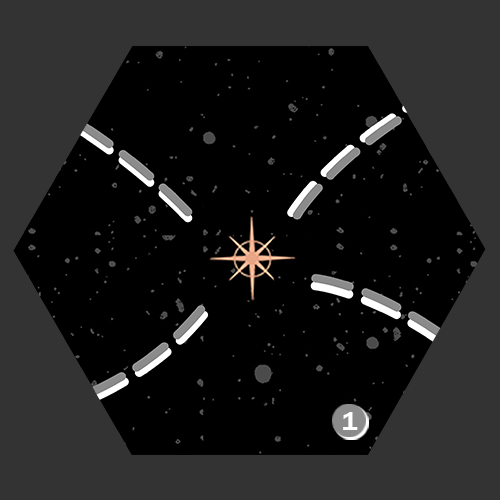
<style>
.page{position:relative;width:500px;height:500px;background:#000000}
.page>*{position:absolute;margin:0}
.t1{font:26px "FranklinGothic-Demi";color:#ffffff}
</style>
<div class="page">
<p class="t1" style="left:343px;top:412px;width:15px;height:18px">1</p>
</div>
